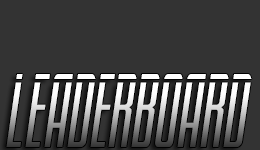
<style>
.page{position:relative;width:260px;height:150px;background:#333333}
.page>*{position:absolute;margin:0}
.t1{font:93.7px "BlueCobraLaserItalic";scale:1.06 1}
</style>
<div class="page">
<p class="t1" style="left:6px;top:74px;width:246px;height:73px">LEADERBOARD</p>
</div>
